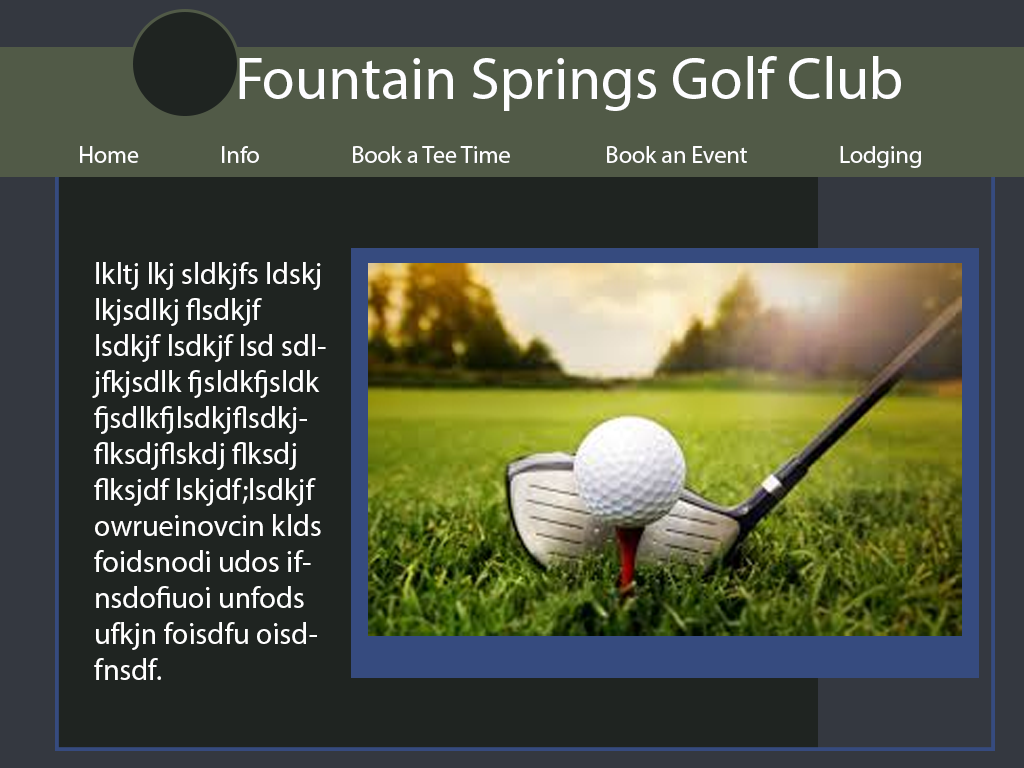
<style>
.page{position:relative;width:1024px;height:768px;background:#1f2421}
.page>*{position:absolute;margin:0}
.t1{font:60px "MyriadPro-Regular";color:#fdfdff}
.t2{font:24px "MyriadPro-Regular";color:#fdfdff}
.t3{font:30px "MyriadPro-Regular";color:#ffffff}
</style>
<div class="page">
<p class="t1" style="left:239px;top:56px;width:662px;height:55px">Fountain Springs Golf Club</p>
<p class="t2" style="left:80px;top:146px;width:59px;height:17px">Home</p>
<p class="t2" style="left:222px;top:146px;width:37px;height:17px">Info</p>
<p class="t2" style="left:353px;top:146px;width:157px;height:17px">Book a Tee Time</p>
<p class="t2" style="left:607px;top:146px;width:140px;height:17px">Book an Event</p>
<p class="t2" style="left:840px;top:146px;width:81px;height:22px">Lodging</p>
<p class="t3" style="left:92px;top:262px;width:234px;height:418px">lkltj lkj sldkjfs ldskj lkjsdlkj flsdkjf lsdkjf lsdkjf lsd sdljfkjsdlk fjsldkfjsldk fjsdlkfjlsdkjflsdkjflksdjflskdj flksdj flksjdf lskjdf;lsdkjf owrueinovcin klds foidsnodi udos ifnsdofiuoi unfods ufkjn foisdfu oisdfnsdf.</p>
</div>
